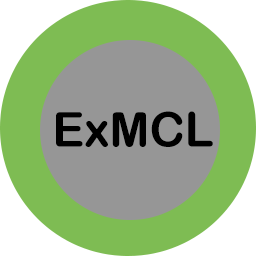
<style>
.page{position:relative;width:256px;height:256px;background:#7ebc53}
.page>*{position:absolute;margin:0}
.t1{font:48px "ArialRoundedMTBold";color:#000000}
</style>
<div class="page">
<p class="t1" style="left:56px;top:111px;width:157px;height:36px">ExMCL</p>
</div>
